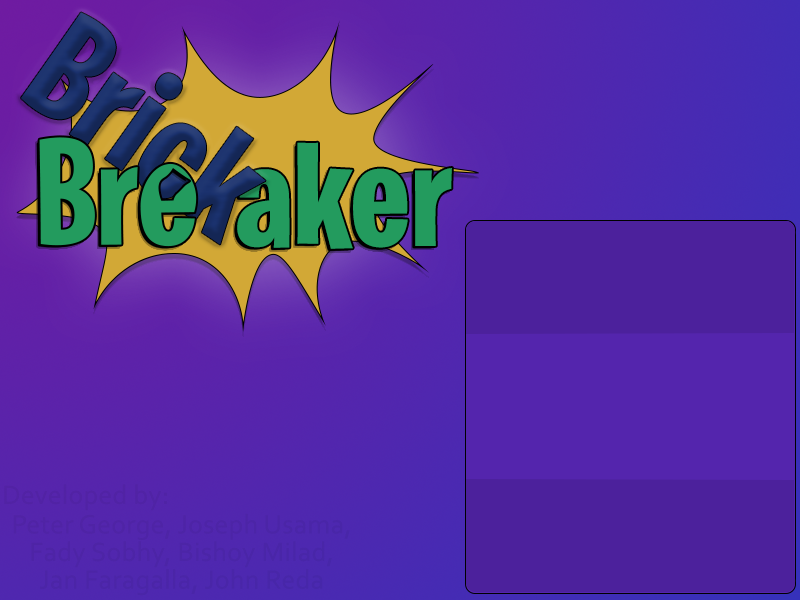
<style>
.page{position:relative;width:800px;height:600px}
.page>*{position:absolute;margin:0}
.t1{font:151.2px "BurbankBigCondensed-Bold";letter-spacing:0.01em;color:#1a316d}
.t2{font:151.2px "BurbankBigCondensed-Bold";letter-spacing:0.01em;color:#239b5e}
.t3{font:27.6px "Corbel";letter-spacing:0.01em;color:#5123a5}
.t4{font:27.6px "Corbel";letter-spacing:0.01em;color:#4c25a7}
</style>
<div class="page">
<p class="t1" style="left:21px;top:12px;width:245px;height:233px;rotate:36deg">Brick</p>
<p class="t2" style="left:237px;top:142px;width:215px;height:107px">aker</p>
<p class="t3" style="left:4px;top:484px;width:163px;height:27px">Developed by:</p>
<p class="t4" style="left:13px;top:513px;width:337px;height:83px;text-align:center">Peter George, Joseph Usama,<br>Fady Sobhy, Bishoy Milad,<br>Jan Faragalla, John Reda</p>
</div>
